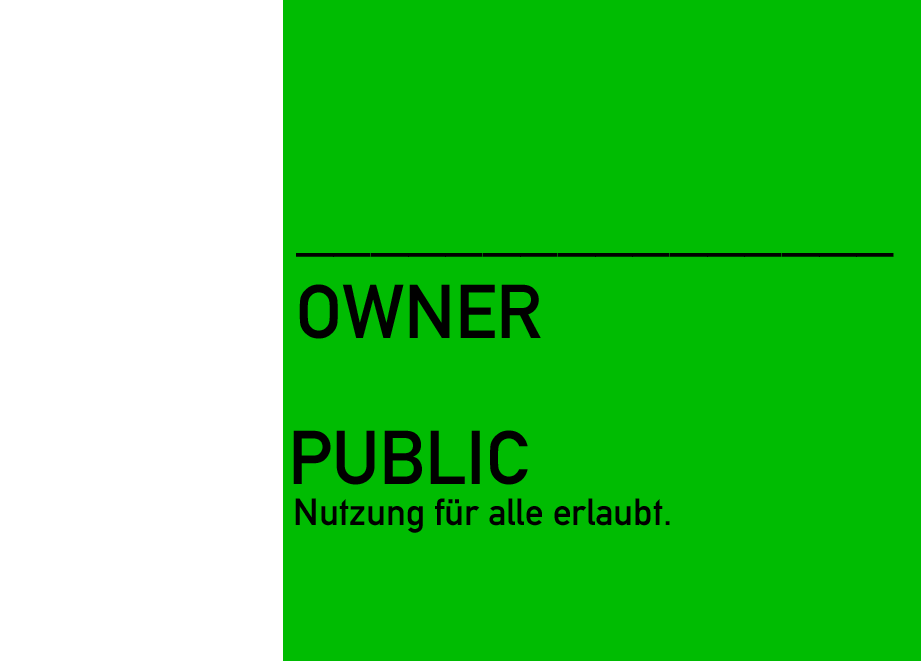
<style>
.page{position:relative;width:921px;height:661px;background:#00bc02}
.page>*{position:absolute;margin:0}
.t1{font:74.7px "AlteDIN1451Mittelschrift";color:#000000}
.t2{font:37.4px "AlteDIN1451Mittelschrift";color:#000000}
</style>
<div class="page">
<p class="t1" style="left:296px;top:253px;width:598px;height:86px">________________<br>OWNER</p>
<p class="t1" style="left:293px;top:430px;width:235px;height:55px">PUBLIC</p>
<p class="t2" style="left:295px;top:498px;width:375px;height:35px">Nutzung für alle erlaubt.</p>
</div>
